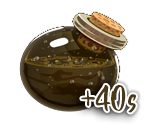
<style>
.page{position:relative;width:145px;height:124px;background:#ffffff}
.page>*{position:absolute;margin:0}
.t1{font:29.6px "BeyondTheMountains";color:#4b3817;scale:0.86 1}
</style>
<div class="page">
<p class="t1" style="left:81px;top:85px;width:55px;height:28px">+40s</p>
</div>
